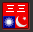
<style>
.page{position:relative;width:33px;height:32px;background:#f20000}
.page>*{position:absolute;margin:0}
.t1{font:10.4px "SimSun";color:#ffffff}
</style>
<div class="page">
<p class="t1" style="left:6px;top:5px;width:19px;height:7px">三三</p>
</div>
